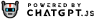
<style>
.page{position:relative;width:95px;height:19px;background:#ffffff}
.page>*{position:absolute;margin:0}
.t1{font:5.2px "BabaPro-Bold";letter-spacing:-0.02em}
.t2{font:9.4px "BabaPro-Bold";letter-spacing:-0.02em;color:#000000}
.t3{font:7.4px "BabaPro-Bold";letter-spacing:-0.02em}
</style>
<div class="page">
<p class="t1" style="left:28px;top:3px;width:53px;height:5px">p o w e r e d   b y</p>
<p class="t2" style="left:27px;top:9px;width:55px;height:8px">CHATGPT</p>
<p class="t3" style="left:81px;top:10px;width:13px;height:7px">.js</p>
</div>
